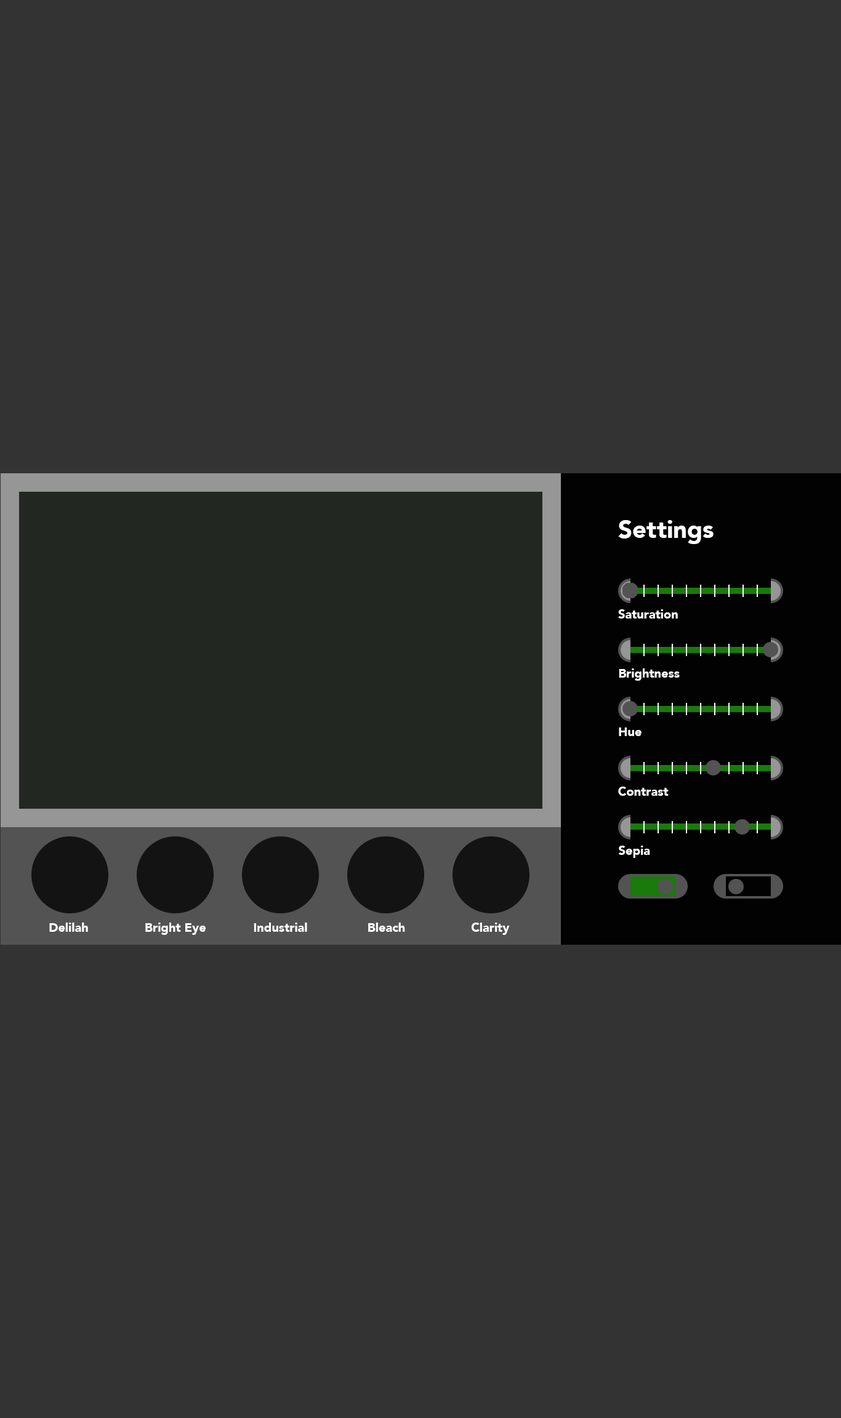
<style>
.page{position:relative;width:841px;height:1418px;background:#333333}
.page>*{position:absolute;margin:0}
.t1{font:24.6px "Avenir-Black";color:#ffffff}
.t2{font:12.3px "Avenir-Black";color:#ffffff}
</style>
<div class="page">
<p class="t1" style="left:618px;top:520px;width:95px;height:24px">Settings</p>
<p class="t2" style="left:618px;top:609px;width:60px;height:10px">Saturation</p>
<p class="t2" style="left:619px;top:668px;width:61px;height:13px">Brightness</p>
<p class="t2" style="left:619px;top:728px;width:22px;height:8px">Hue</p>
<p class="t2" style="left:618px;top:787px;width:50px;height:9px">Contrast</p>
<p class="t2" style="left:618px;top:846px;width:32px;height:12px">Sepia</p>
<p class="t2" style="left:49px;top:923px;width:39px;height:9px">Delilah</p>
<p class="t2" style="left:145px;top:923px;width:61px;height:12px">Bright Eye</p>
<p class="t2" style="left:254px;top:923px;width:53px;height:9px">Industrial</p>
<p class="t2" style="left:368px;top:923px;width:37px;height:9px">Bleach</p>
<p class="t2" style="left:471px;top:923px;width:39px;height:12px">Clarity</p>
</div>
